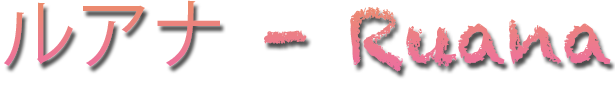
<style>
.page{position:relative;width:615px;height:90px;background:#ffffff}
.page>*{position:absolute;margin:0}
.t1{font:75px "Chalkduster";color:#ed8f8f}
.t2{font:75px "KozGoPr6N-Regular";color:#ed8f8f}
</style>
<div class="page">
<p class="t1" style="left:4px;top:0px;width:607px;height:72px"><span class="t2">ルアナ</span> - Ruana</p>
</div>
